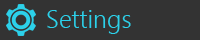
<style>
.page{position:relative;width:200px;height:40px;background:#333333}
.page>*{position:absolute;margin:0}
.t1{font:25px "SegoeUI-Semilight";color:#2cd1ea}
</style>
<div class="page">
<p class="t1" style="left:47px;top:10px;width:84px;height:24px">Settings</p>
</div>
